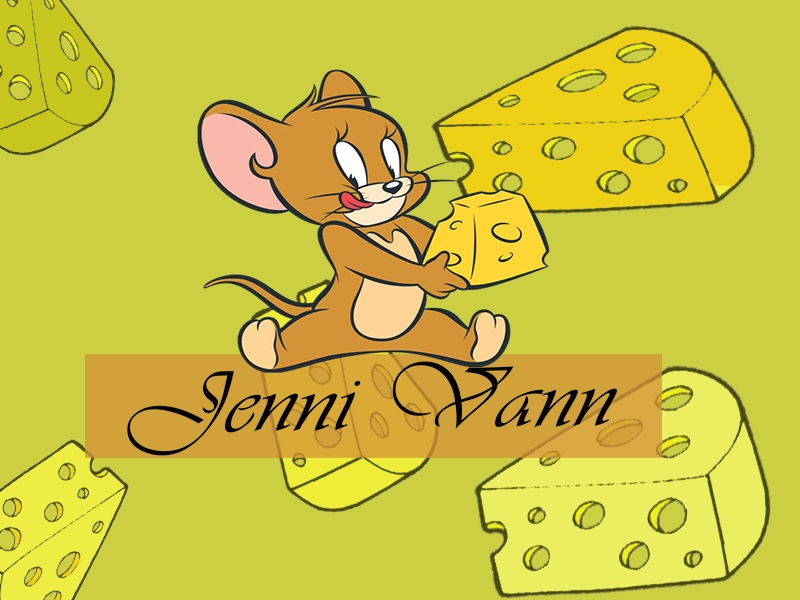
<style>
.page{position:relative;width:800px;height:600px;background:#cdcf43}
.page>*{position:absolute;margin:0}
.t1{font:90px "Vivaldii";color:#000000;scale:1.14 1}
</style>
<div class="page">
<p class="t1" style="left:127px;top:361px;width:490px;height:95px;rotate:-1deg">Jenni Vann</p>
</div>
